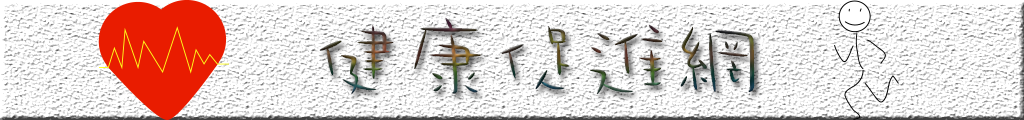
<style>
.page{position:relative;width:1024px;height:120px;background:#ffffff}
.page>*{position:absolute;margin:0}
.t1{font:90px "DFTongTongStd-W3"}
</style>
<div class="page">
<p class="t1" style="left:319px;top:17px;width:436px;height:78px">健康促進網</p>
</div>
